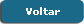
<style>
.page{position:relative;width:84px;height:24px;background:#1a6988}
.page>*{position:absolute;margin:0}
.t1{font:10px "Verdana-Bold";color:#ffffff}
</style>
<div class="page">
<p class="t1" style="left:26px;top:7px;width:34px;height:8px">Voltar</p>
</div>
